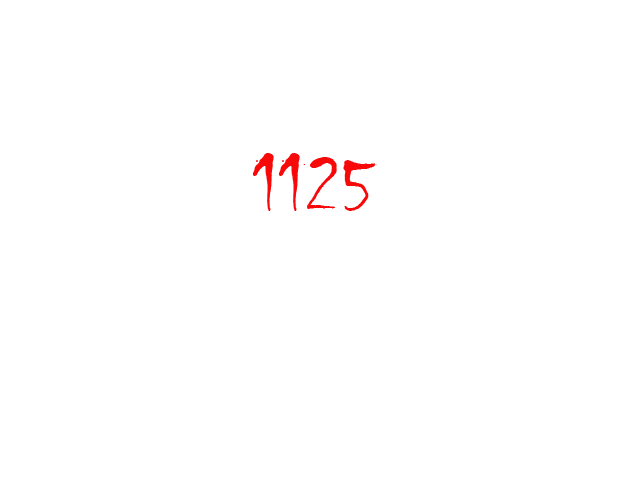
<style>
.page{position:relative;width:630px;height:500px;background:#ffffff}
.page>*{position:absolute;margin:0}
.t1{font:83.3px "Chiller-Regular";color:#f80909}
</style>
<div class="page">
<p class="t1" style="left:252px;top:153px;width:125px;height:58px">1125</p>
</div>
